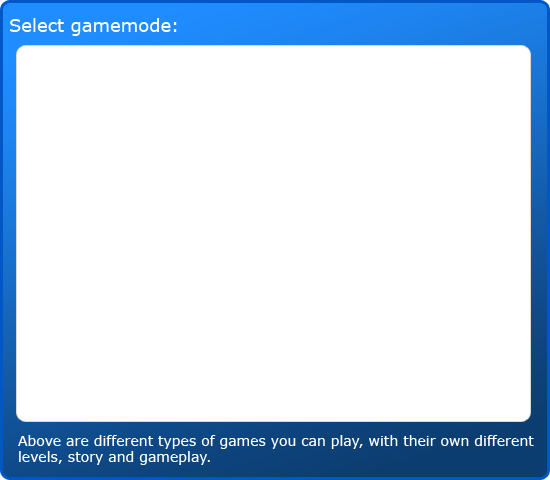
<style>
.page{position:relative;width:550px;height:480px;background:#ffffff}
.page>*{position:absolute;margin:0}
.t1{font:18px "Verdana";color:#ffffff}
.t2{font:14px "Verdana";color:#ffffff}
</style>
<div class="page">
<p class="t1" style="left:10px;top:18px;width:167px;height:18px">Select gamemode:</p>
<p class="t2" style="left:18px;top:435px;width:516px;height:30px">Above are different types of games you can play, with their own different levels, story and gameplay.</p>
</div>
